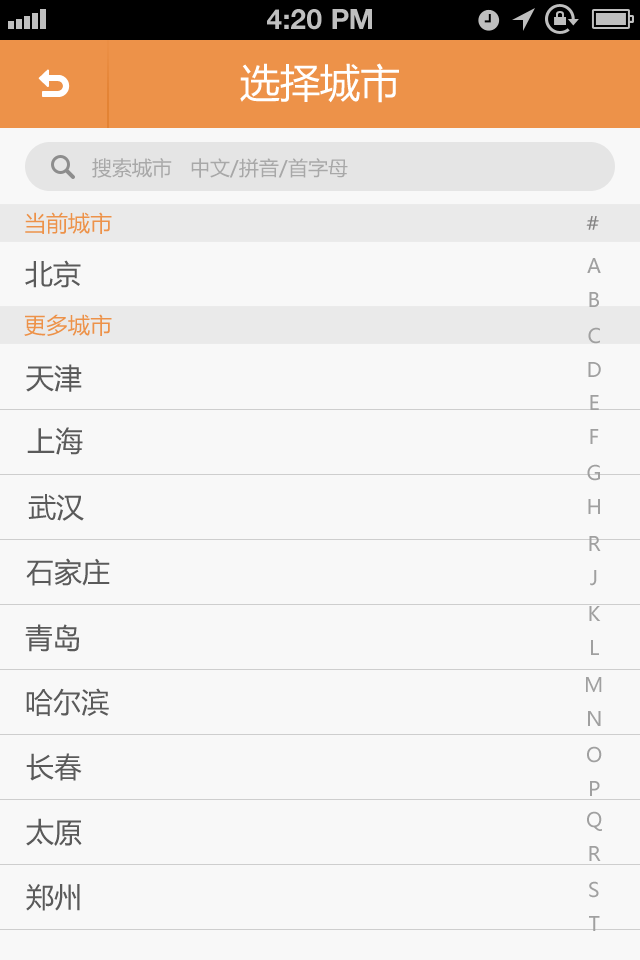
<style>
.page{position:relative;width:640px;height:960px;background:#f8f8f8}
.page>*{position:absolute;margin:0}
.t1{font:28px "HelveticaNeue-Bold";color:#bfbfbf;text-transform:uppercase}
.t2{font:40px "MicrosoftYaHei";color:#ffffff}
.t3{font:20px "MicrosoftYaHei";color:#a8a8a8}
.t4{font:22px "MicrosoftYaHei";color:#ed9249}
.t5{font:20px "MicrosoftYaHei";color:#858484}
.t6{font:28px "MicrosoftYaHei";color:#5a5a5a}
.t7{font:20px "MicrosoftYaHei";color:#a0a0a0}
</style>
<div class="page">
<p class="t1" style="left:267px;top:9px;width:105px;height:21px">4:20 PM</p>
<p class="t2" style="left:240px;top:63px;width:159px;height:40px">选择城市</p>
<p class="t3" style="left:92px;top:158px;width:256px;height:20px">搜索城市   中文/拼音/首字母</p>
<p class="t4" style="left:25px;top:212px;width:87px;height:22px">当前城市</p>
<p class="t5" style="left:586px;top:216px;width:13px;height:14px">#</p>
<p class="t6" style="left:25px;top:260px;width:56px;height:28px">北京</p>
<p class="t7" style="left:587px;top:258px;width:14px;height:15px">A</p>
<p class="t7" style="left:589px;top:292px;width:10px;height:15px">B</p>
<p class="t4" style="left:24px;top:314px;width:88px;height:22px">更多城市</p>
<p class="t7" style="left:588px;top:327px;width:12px;height:17px">C</p>
<p class="t6" style="left:26px;top:364px;width:56px;height:28px">天津</p>
<p class="t7" style="left:588px;top:362px;width:13px;height:15px">D</p>
<p class="t7" style="left:590px;top:395px;width:9px;height:15px">E</p>
<p class="t6" style="left:27px;top:427px;width:56px;height:28px">上海</p>
<p class="t7" style="left:590px;top:429px;width:9px;height:15px">F</p>
<p class="t7" style="left:587px;top:464px;width:13px;height:17px">G</p>
<p class="t6" style="left:28px;top:494px;width:56px;height:27px">武汉</p>
<p class="t7" style="left:588px;top:499px;width:12px;height:15px">H</p>
<p class="t7" style="left:589px;top:536px;width:12px;height:15px">R</p>
<p class="t6" style="left:26px;top:558px;width:84px;height:28px">石家庄</p>
<p class="t7" style="left:590px;top:570px;width:7px;height:16px">J</p>
<p class="t7" style="left:589px;top:606px;width:12px;height:15px">K</p>
<p class="t6" style="left:25px;top:624px;width:54px;height:28px">青岛</p>
<p class="t7" style="left:591px;top:640px;width:8px;height:15px">L</p>
<p class="t7" style="left:586px;top:677px;width:16px;height:15px">M</p>
<p class="t6" style="left:26px;top:688px;width:83px;height:28px">哈尔滨</p>
<p class="t7" style="left:588px;top:711px;width:13px;height:15px">N</p>
<p class="t7" style="left:587px;top:746px;width:15px;height:17px">O</p>
<p class="t6" style="left:26px;top:753px;width:56px;height:28px">长春</p>
<p class="t7" style="left:590px;top:781px;width:10px;height:15px">P</p>
<p class="t6" style="left:26px;top:818px;width:56px;height:28px">太原</p>
<p class="t7" style="left:587px;top:811px;width:15px;height:20px">Q</p>
<p class="t7" style="left:589px;top:846px;width:12px;height:15px">R</p>
<p class="t7" style="left:589px;top:881px;width:10px;height:17px">S</p>
<p class="t6" style="left:26px;top:884px;width:54px;height:27px">郑州</p>
<p class="t7" style="left:589px;top:916px;width:11px;height:15px">T</p>
</div>
